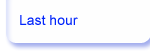
<style>
.page{position:relative;width:150px;height:54px;background:#fefefe}
.page>*{position:absolute;margin:0}
.t1{font:14px "ArialMT";color:#0326fb}
</style>
<div class="page">
<p class="t1" style="left:20px;top:15px;width:58px;height:10px">Last hour</p>
</div>
